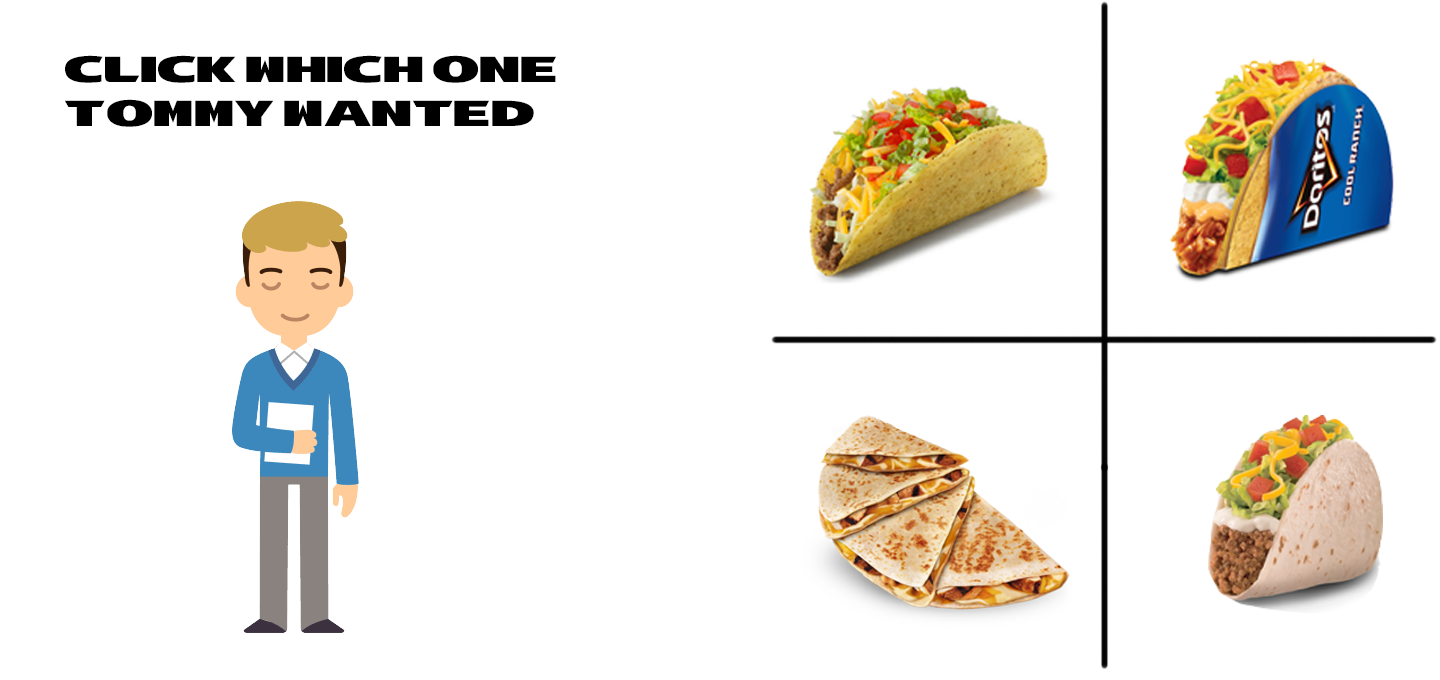
<style>
.page{position:relative;width:1440px;height:680px;background:#ffffff}
.page>*{position:absolute;margin:0}
.t1{font:36px "TacoBell-Bold";color:#010000}
</style>
<div class="page">
<p class="t1" style="left:65px;top:55px;width:491px;height:72px">click which one <br>tommy wanted</p>
</div>
